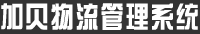
<style>
.page{position:relative;width:200px;height:34px;background:#333333}
.page>*{position:absolute;margin:0}
.t1{font:29.2px "FZZYJW--GB1-0";letter-spacing:0.075em;color:#ffffff;scale:0.8 1}
</style>
<div class="page">
<p class="t1" style="left:1px;top:3px;width:197px;height:27px">加贝物流管理系统</p>
</div>
